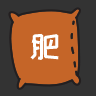
<style>
.page{position:relative;width:96px;height:96px;background:#333333}
.page>*{position:absolute;margin:0}
.t1{font:32px "HappyZcool-2016";color:#ffffff}
</style>
<div class="page">
<p class="t1" style="left:30px;top:33px;width:29px;height:27px">肥</p>
</div>
